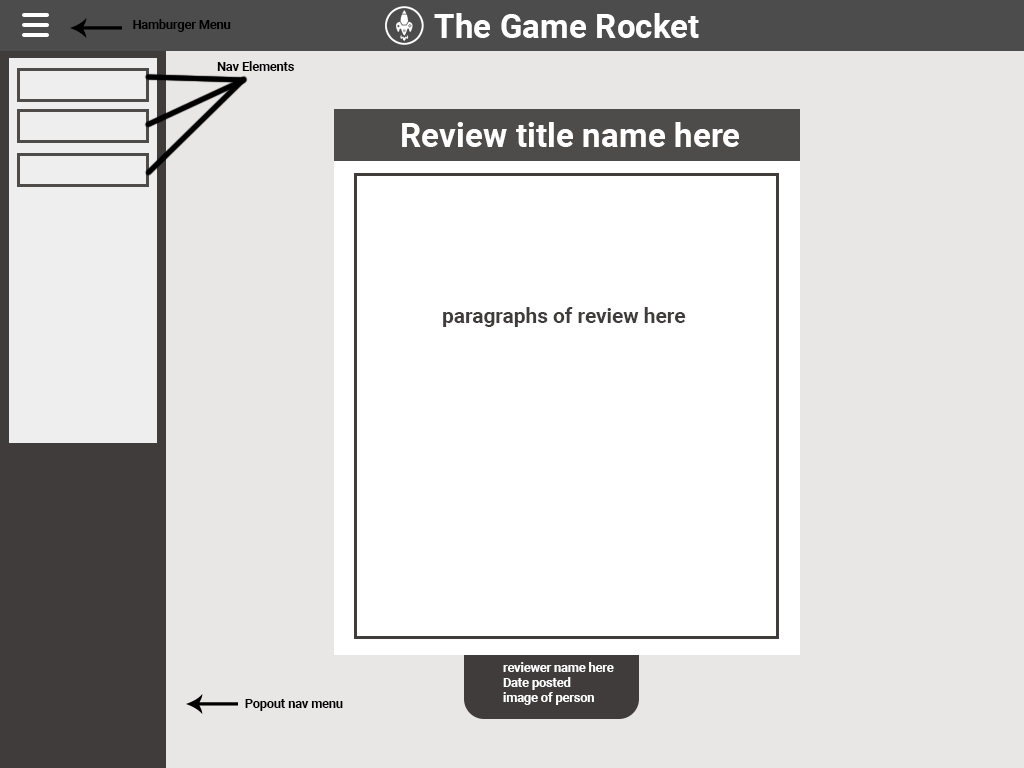
<style>
.page{position:relative;width:1024px;height:768px;background:#e9e6e6}
.page>*{position:absolute;margin:0}
.t1{font:33.3px "Roboto-Bold";color:#ffffff}
.t2{font:12.5px "Roboto-Bold";color:#000000}
.t3{font:20.8px "Roboto-Bold";color:#3f3c3b}
.t4{font:12.5px "Roboto-Bold";color:#ffffff}
</style>
<div class="page">
<p class="t1" style="left:434px;top:13px;width:265px;height:25px">The Game Rocket</p>
<p class="t2" style="left:133px;top:19px;width:98px;height:13px">Hamburger Menu</p>
<p class="t2" style="left:217px;top:61px;width:77px;height:10px">Nav Elements</p>
<p class="t1" style="left:402px;top:122px;width:337px;height:25px">Review title name here</p>
<p class="t3" style="left:443px;top:307px;width:243px;height:20px">paragraphs of review here</p>
<p class="t4" style="left:503px;top:662px;width:111px;height:43px">reviewer name here<br>Date posted<br>image of person</p>
<p class="t2" style="left:245px;top:699px;width:98px;height:12px">Popout nav menu</p>
</div>
